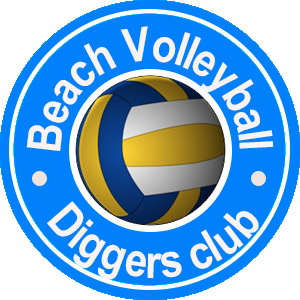
<style>
.page{position:relative;width:300px;height:300px;background:#0080fb}
.page>*{position:absolute;margin:0}
.t1{font:46.9px "Arial-BoldMT";letter-spacing:-0.1em;color:#f8f4f4;scale:0.87 1}
.t2{font:46.9px "Arial-BoldMT";letter-spacing:-0.12em;color:#f8f4f4;scale:0.87 1}
</style>
<div class="page">
<p class="t1" style="left:26px;top:26px;width:248px;height:125px;text-align:center">Beach Volleyball</p>
<p class="t2" style="left:47px;top:201px;width:212px;height:79px">Diggers club</p>
</div>
